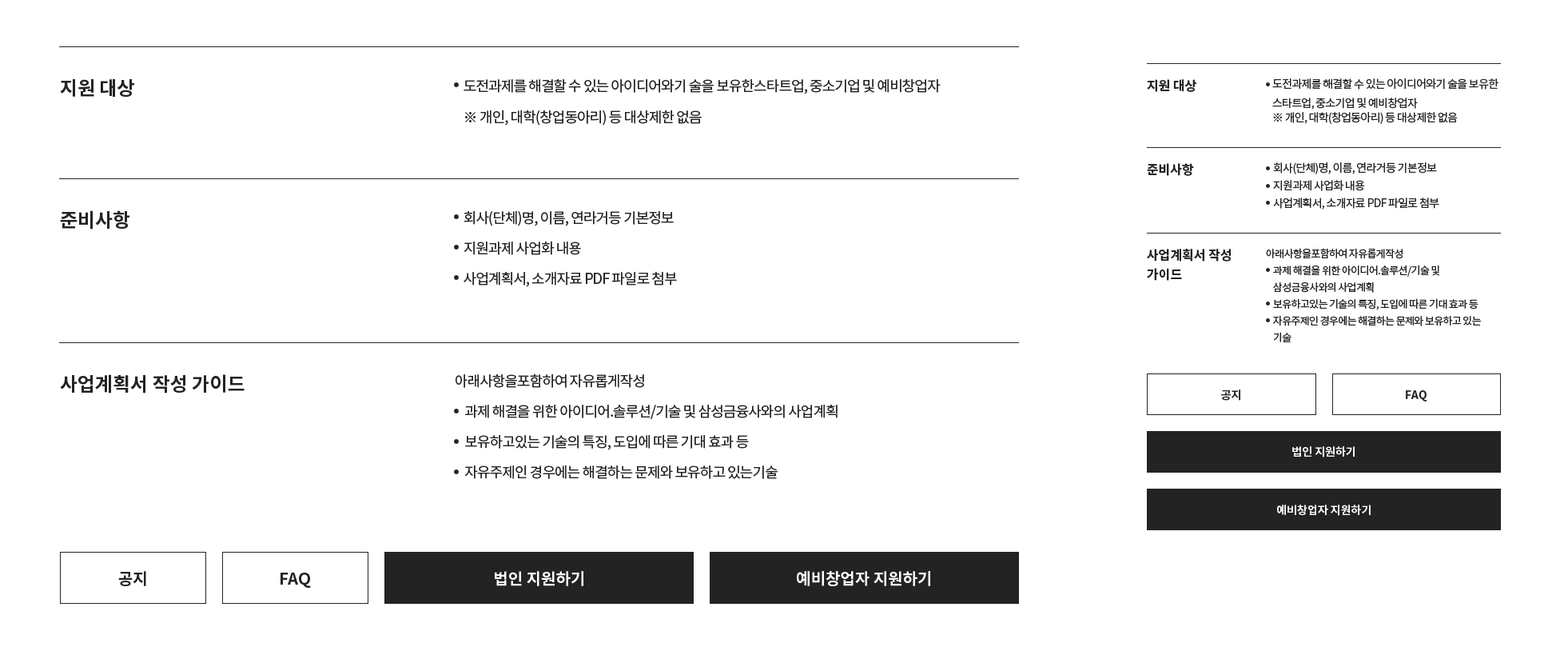
<style>
.page{position:relative;width:1568px;height:667px;background:#ffffff}
.page>*{position:absolute;margin:0}
.t1{font:19.2px "NotoSansKR-Bold";color:#232323}
.t2{font:14.4px "NotoSansKR-Regular";letter-spacing:-0.05em;color:#232323}
.t3{font:12.8px "NotoSansKR-Bold";color:#232323}
.t4{font:11.2px/19.2px "NotoSansKR-Regular";letter-spacing:-0.05em;color:#232323}
.t5{font:11.2px "NotoSansKR-Regular";letter-spacing:-0.05em;color:#232323}
.t6{font:11.2px/17.6px "NotoSansKR-Regular";letter-spacing:-0.05em;color:#232323}
.t7{font:14.4px/30.4px "NotoSansKR-Regular";letter-spacing:-0.05em;color:#232323}
.t8{font:12.8px/19.2px "NotoSansKR-Bold";color:#232323}
.t9{font:10.4px/16.8px "NotoSansKR-Regular";letter-spacing:-0.05em;color:#232323}
.t10{font:11.2px "NotoSansKR-Bold";color:#232323}
.t11{font:11.2px "NotoSansKR-Bold";color:#ffffff}
.t12{font:16px "NotoSansKR-Bold";color:#232323}
.t13{font:16px "NotoSansKR-Bold";color:#ffffff}
</style>
<div class="page">
<p class="t1" style="left:60px;top:79px;width:74px;height:18px">지원 대상</p>
<p class="t2" style="left:464px;top:79px;width:477px;height:15px">도전과제를 해결할 수 있는 아이디어와기 술을 보유한스타트업, 중소기업 및 예비창업자</p>
<p class="t3" style="left:1147px;top:79px;width:49px;height:13px">지원 대상</p>
<p class="t4" style="left:1272px;top:78px;width:226px;height:31px">도전과제를 해결할 수 있는 아이디어와기 술을 보유한<br>스타트업, 중소기업 및 예비창업자</p>
<p class="t2" style="left:465px;top:109px;width:237px;height:16px">※ 개인, 대학(창업동아리) 등 대상제한 없음</p>
<p class="t5" style="left:1273px;top:112px;width:185px;height:12px">※ 개인, 대학(창업동아리) 등 대상제한 없음</p>
<p class="t3" style="left:1147px;top:163px;width:47px;height:13px">준비사항</p>
<p class="t6" style="left:1273px;top:162px;width:166px;height:47px">회사(단체)명, 이름, 연라거등 기본정보<br>지원과제 사업화 내용<br>사업계획서, 소개자료 PDF 파일로 첨부</p>
<p class="t1" style="left:60px;top:210px;width:69px;height:19px">준비사항</p>
<p class="t7" style="left:464px;top:210px;width:213px;height:77px">회사(단체)명, 이름, 연라거등 기본정보<br>지원과제 사업화 내용<br>사업계획서, 소개자료 PDF 파일로 첨부</p>
<p class="t8" style="left:1147px;top:249px;width:84px;height:32px">사업계획서 작성<br>가이드</p>
<p class="t9" style="left:1266px;top:248px;width:216px;height:94px">아래사항을포함하여 자유롭게작성<br>    과제 해결을 위한 아이디어.솔루션/기술 및 <br>    삼성금융사와의 사업계획<br>    보유하고있는 기술의 특징, 도입에 따른 기대 효과 등<br>    자유주제인 경우에는 해결하는 문제와 보유하고 있는<br>    기술</p>
<p class="t1" style="left:60px;top:374px;width:185px;height:19px">사업계획서 작성 가이드</p>
<p class="t7" style="left:456px;top:373px;width:382px;height:106px">아래사항을포함하여 자유롭게작성<br>    과제 해결을 위한 아이디어.솔루션/기술 및 삼성금융사와의 사업계획<br>    보유하고있는 기술의 특징, 도입에 따른 기대 효과 등<br>    자유주제인 경우에는 해결하는 문제와 보유하고 있는기술</p>
<p class="t10" style="left:1221px;top:389px;width:19px;height:11px">공지</p>
<p class="t10" style="left:1406px;top:390px;width:21px;height:11px">FAQ</p>
<p class="t11" style="left:1292px;top:446px;width:63px;height:11px">법인 지원하기</p>
<p class="t11" style="left:1277px;top:504px;width:94px;height:11px">예비창업자 지원하기</p>
<p class="t12" style="left:118px;top:571px;width:28px;height:15px">공지</p>
<p class="t12" style="left:281px;top:572px;width:30px;height:15px">FAQ</p>
<p class="t13" style="left:495px;top:571px;width:88px;height:15px">법인 지원하기</p>
<p class="t13" style="left:797px;top:571px;width:133px;height:15px">예비창업자 지원하기</p>
</div>
